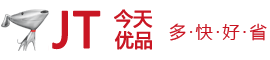
<style>
.page{position:relative;width:270px;height:60px;background:#ffffff}
.page>*{position:absolute;margin:0}
.t1{font:48px "MicrosoftYaHei";color:#c91623;font-weight:bold}
.t2{font:18.7px "MicrosoftYaHei";color:#c91623;font-weight:bold}
</style>
<div class="page">
<p class="t1" style="left:52px;top:10px;width:49px;height:40px">JT</p>
<p class="t2" style="left:114px;top:9px;width:39px;height:20px">今天</p>
<p class="t2" style="left:114px;top:31px;width:38px;height:19px">优品</p>
</div>
